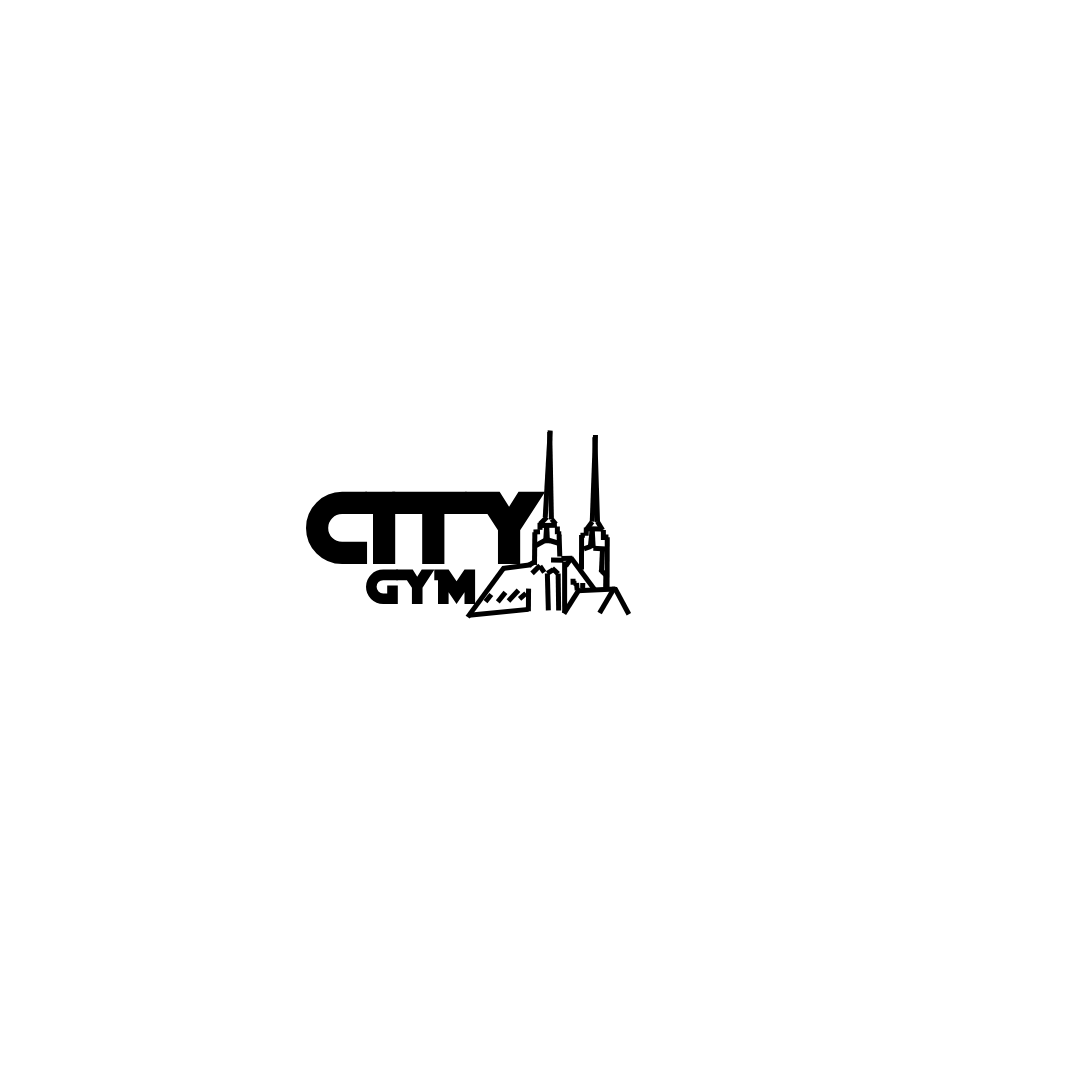
<style>
.page{position:relative;width:1080px;height:1080px;background:#ffffff}
.page>*{position:absolute;margin:0}
.t1{font:111px "DistantGalaxy";color:#000000}
.t2{font:53px "DistantGalaxy";color:#000000}
</style>
<div class="page">
<p class="t1" style="left:306px;top:491px;width:240px;height:73px">CITY</p>
<p class="t2" style="left:366px;top:569px;width:110px;height:35px">GYM</p>
</div>
